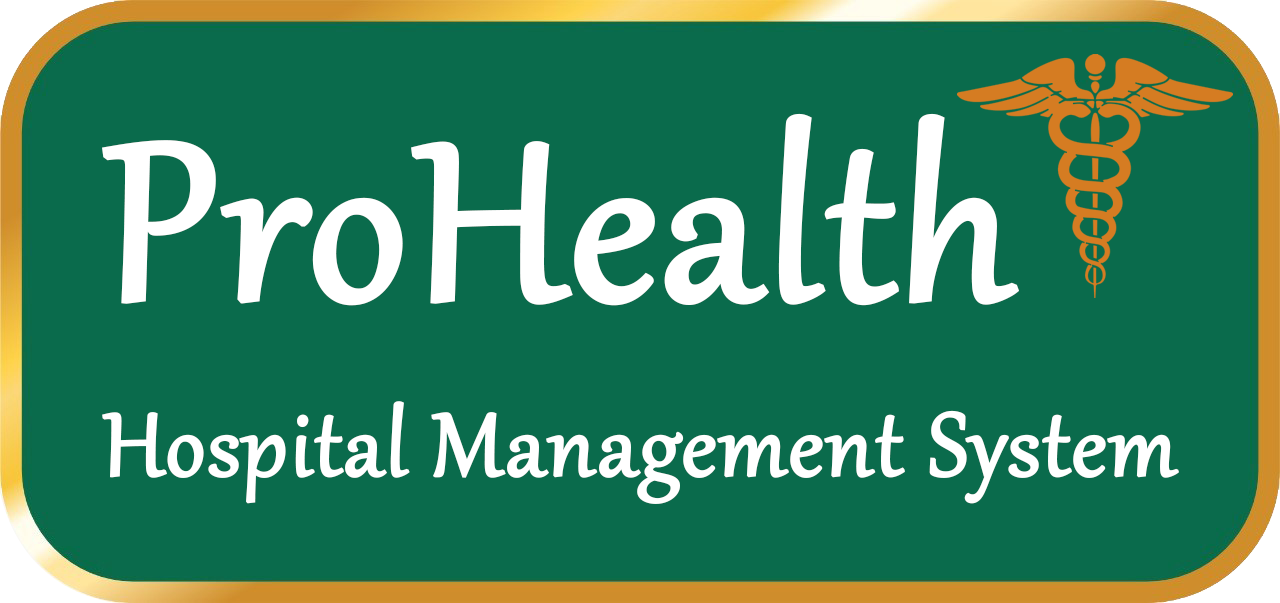
<style>
.page{position:relative;width:1280px;height:603px;background:#0a6b4c}
.page>*{position:absolute;margin:0}
.t1{font:272px "Gabriola";color:#ffffff;font-weight:bold}
.t2{font:109.3px "Gabriola";color:#ffffff;font-weight:bold}
</style>
<div class="page">
<p class="t1" style="left:102px;top:113px;width:917px;height:193px">ProHealth</p>
<p class="t2" style="left:102px;top:401px;width:1077px;height:103px">Hospital Management System</p>
</div>
